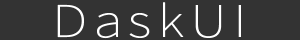
<style>
.page{position:relative;width:300px;height:40px;background:#333333}
.page>*{position:absolute;margin:0}
.t1{font:44px "NotoSansHans-Thin";letter-spacing:0.12em;color:#ffffff;scale:1.2 1}
</style>
<div class="page">
<p class="t1" style="left:57px;top:2px;width:184px;height:37px">DaskUI</p>
</div>
